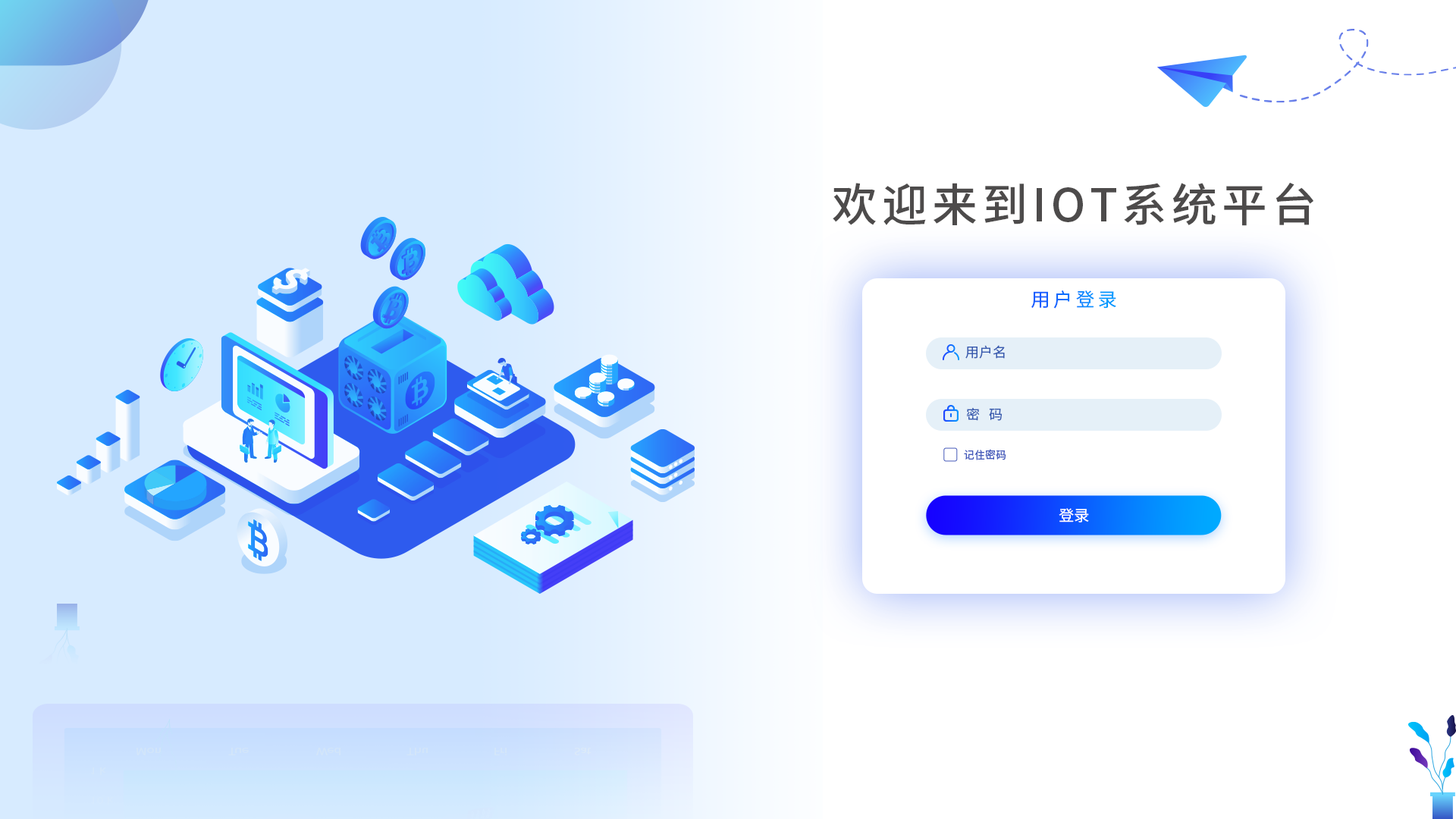
<style>
.page{position:relative;width:1456px;height:819px;background:#ffffff}
.page>*{position:absolute;margin:0}
.t1{font:45.5px "SourceHanSansCN-Medium";letter-spacing:0.1em;color:#4d4b4b;text-transform:uppercase}
.t2{font:19px "SourceHanSansCN-Regular";letter-spacing:0.18em}
.t3{font:13.6px "SourceHanSansCN-Regular";color:#385baf}
.t4{font:10.6px "SourceHanSansCN-Regular";color:#465ab9}
.t5{font:15.2px "SourceHanSansCN-Regular";color:#ffffff}
</style>
<div class="page">
<p class="t1" style="left:833px;top:183px;width:480px;height:43px">欢迎来到IOT系统平台</p>
<p class="t2" style="left:1031px;top:290px;width:85px;height:19px">用户登录</p>
<p class="t3" style="left:965px;top:345px;width:40px;height:14px">用户名</p>
<p class="t3" style="left:966px;top:407px;width:37px;height:14px">密   码</p>
<p class="t4" style="left:964px;top:449px;width:42px;height:11px">记住密码</p>
<p class="t5" style="left:1059px;top:508px;width:30px;height:14px">登录</p>
</div>
